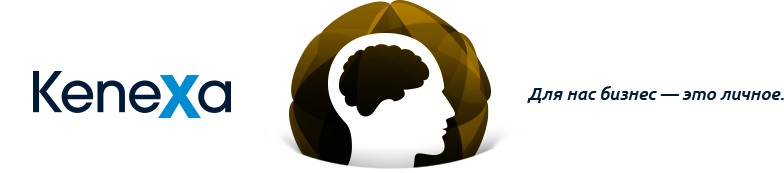
<style>
.page{position:relative;width:784px;height:173px;background:#ffffff}
.page>*{position:absolute;margin:0}
.t1{font:18px "Ubuntu-MediumItalic";color:#001b38}
</style>
<div class="page">
<p class="t1" style="left:527px;top:86px;width:257px;height:17px">Для нас бизнес — это личное.</p>
</div>
